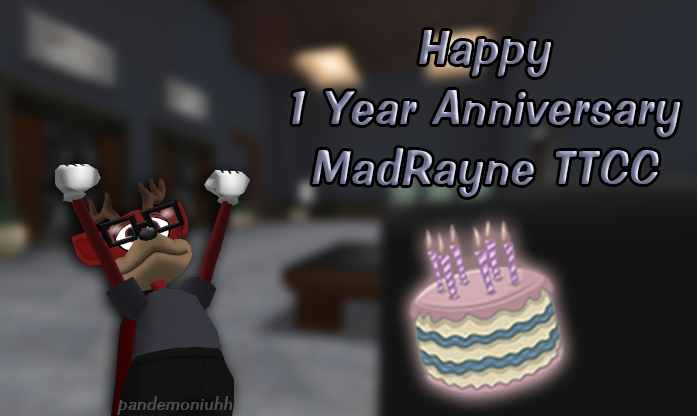
<style>
.page{position:relative;width:697px;height:416px}
.page>*{position:absolute;margin:0}
.t1{font:48px/60px "ImpressBT-Regular";letter-spacing:0.025em;font-style:italic}
.t2{font:18.4px "ImpressBT-Regular";letter-spacing:0.025em;color:#4e4e4e;font-style:italic}
</style>
<div class="page">
<p class="t1" style="left:292px;top:30px;width:388px;height:167px;text-align:center">Happy<br>1 Year Anniversary<br>MadRayne TTCC</p>
<p class="t2" style="left:117px;top:396px;width:116px;height:19px">pandemoniuhh</p>
</div>
